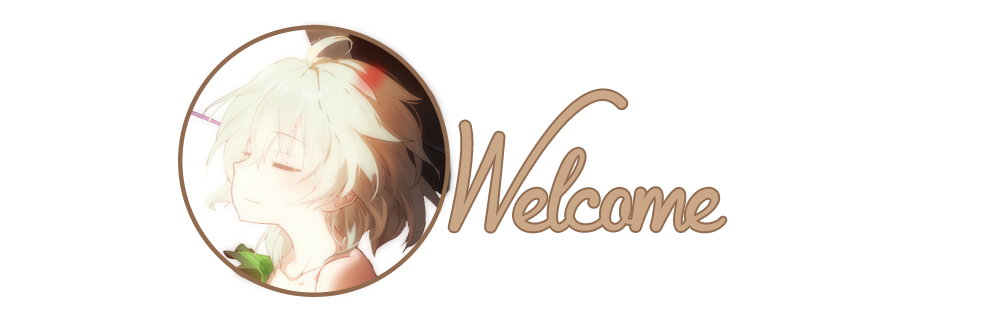
<style>
.page{position:relative;width:1005px;height:330px;background:#ffffff}
.page>*{position:absolute;margin:0}
.t1{font:109.5px "MfQueenLeela";color:#caa786}
</style>
<div class="page">
<p class="t1" style="left:449px;top:90px;width:178px;height:142px">W</p>
<p class="t1" style="left:514px;top:148px;width:212px;height:84px">elcome</p>
</div>
